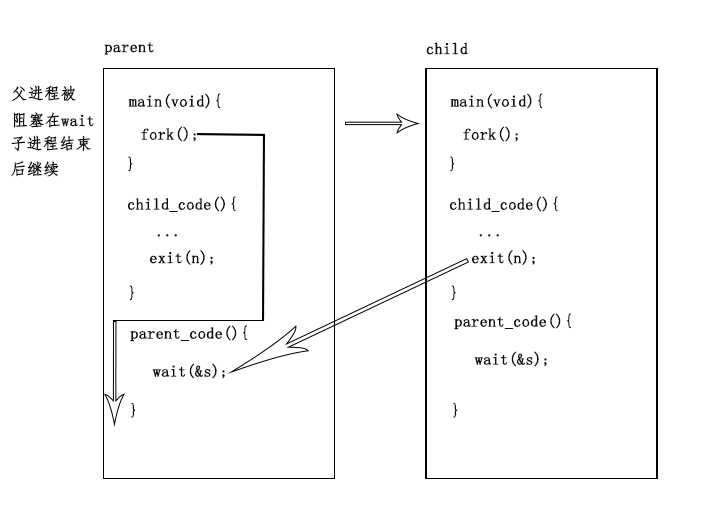
<style>
.page{position:relative;width:709px;height:510px;background:#ffffff}
.page>*{position:absolute;margin:0}
.t1{font:16px "FangSong";color:#111010;font-weight:bold}
</style>
<div class="page">
<p class="t1" style="left:104px;top:42px;width:50px;height:13px">parent</p>
<p class="t1" style="left:426px;top:42px;width:42px;height:13px">child</p>
<p class="t1" style="left:12px;top:85px;width:64px;height:16px">父进程被</p>
<p class="t1" style="left:128px;top:93px;width:93px;height:16px">main(void){</p>
<p class="t1" style="left:450px;top:93px;width:93px;height:16px">main(void){</p>
<p class="t1" style="left:13px;top:112px;width:81px;height:16px">阻塞在wait</p>
<p class="t1" style="left:141px;top:126px;width:55px;height:16px">fork();</p>
<p class="t1" style="left:463px;top:126px;width:55px;height:16px">fork();</p>
<p class="t1" style="left:11px;top:135px;width:80px;height:17px">子进程结束</p>
<p class="t1" style="left:11px;top:161px;width:48px;height:16px">后继续</p>
<p class="t1" style="left:128px;top:156px;width:5px;height:16px">}</p>
<p class="t1" style="left:450px;top:156px;width:5px;height:16px">}</p>
<p class="t1" style="left:128px;top:196px;width:108px;height:16px">child_code(){</p>
<p class="t1" style="left:450px;top:196px;width:108px;height:16px">child_code(){</p>
<p class="t1" style="left:157px;top:234px;width:20px;height:3px">...</p>
<p class="t1" style="left:479px;top:234px;width:20px;height:3px">...</p>
<p class="t1" style="left:150px;top:250px;width:63px;height:15px">exit(n);</p>
<p class="t1" style="left:472px;top:250px;width:63px;height:15px">exit(n);</p>
<p class="t1" style="left:129px;top:285px;width:5px;height:16px">}</p>
<p class="t1" style="left:451px;top:285px;width:5px;height:16px">}</p>
<p class="t1" style="left:454px;top:313px;width:117px;height:17px">parent_code(){</p>
<p class="t1" style="left:130px;top:325px;width:117px;height:17px">parent_code(){</p>
<p class="t1" style="left:474px;top:351px;width:73px;height:16px">wait(&amp;s);</p>
<p class="t1" style="left:152px;top:363px;width:73px;height:16px">wait(&amp;s);</p>
<p class="t1" style="left:131px;top:402px;width:5px;height:16px">}</p>
<p class="t1" style="left:453px;top:402px;width:5px;height:16px">}</p>
</div>
